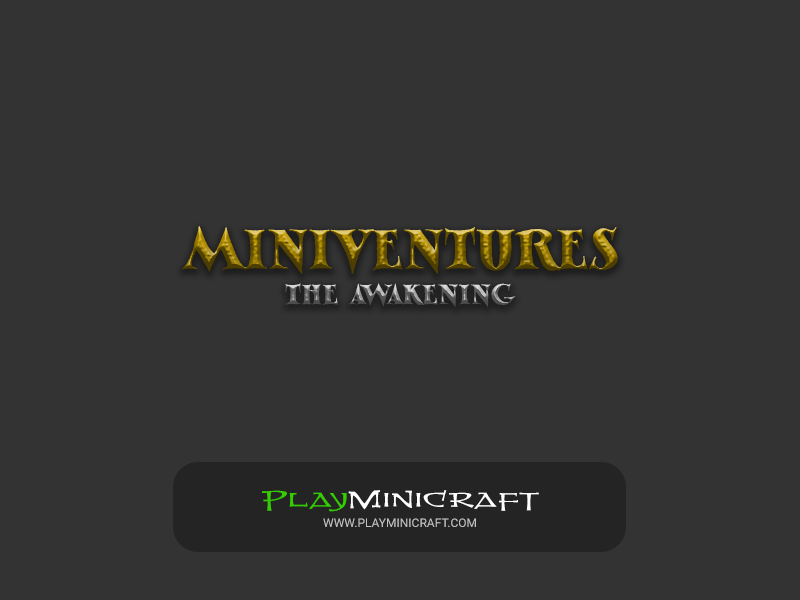
<style>
.page{position:relative;width:800px;height:600px;background:#333333}
.page>*{position:absolute;margin:0}
.t1{font:72px "MythMakerBB"}
.t2{font:36px "MythMakerBB"}
.t3{font:36px "MjollnirBB";color:#ffffff}
.t4{font:36px "MjollnirBB";color:#35cd00}
.t5{font:12px "Roboto-Regular";color:#c3c3c3}
</style>
<div class="page">
<p class="t1" style="left:182px;top:226px;width:436px;height:48px">MINIVENTURES</p>
<p class="t2" style="left:285px;top:283px;width:231px;height:24px">THE AWAKENING</p>
<p class="t3" style="left:262px;top:490px;width:277px;height:22px"><span class="t4">Play</span>Minicraft</p>
<p class="t5" style="left:323px;top:518px;width:153px;height:9px">WWW.PLAYMINICRAFT.COM</p>
</div>
